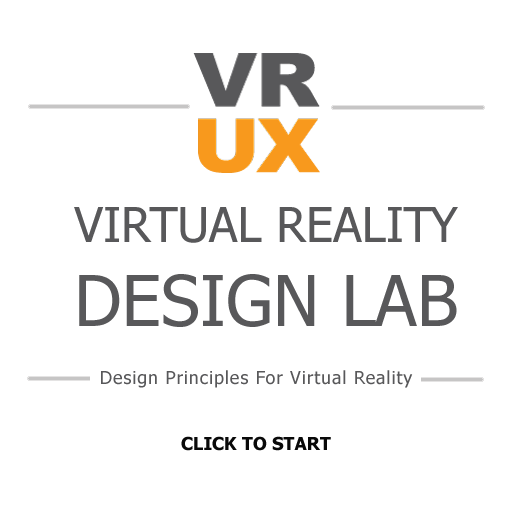
<style>
.page{position:relative;width:512px;height:512px;background:#ffffff}
.page>*{position:absolute;margin:0}
.t1{font:48px "Tahoma";color:#58585a}
.t2{font:70px "Tahoma";color:#58585a}
.t3{font:18px "Tahoma";letter-spacing:0.05em;color:#58585a}
.t4{font:18px "Tahoma-Bold";color:#090909}
</style>
<div class="page">
<p class="t1" style="left:74px;top:207px;width:384px;height:120px;text-align:center">VIRTUAL REALITY<br><span class="t2">DESIGN LAB</span></p>
<p class="t3" style="left:101px;top:370px;width:312px;height:18px">Design Principles For Virtual Reality</p>
<p class="t4" style="left:181px;top:436px;width:150px;height:15px">CLICK TO START</p>
</div>
